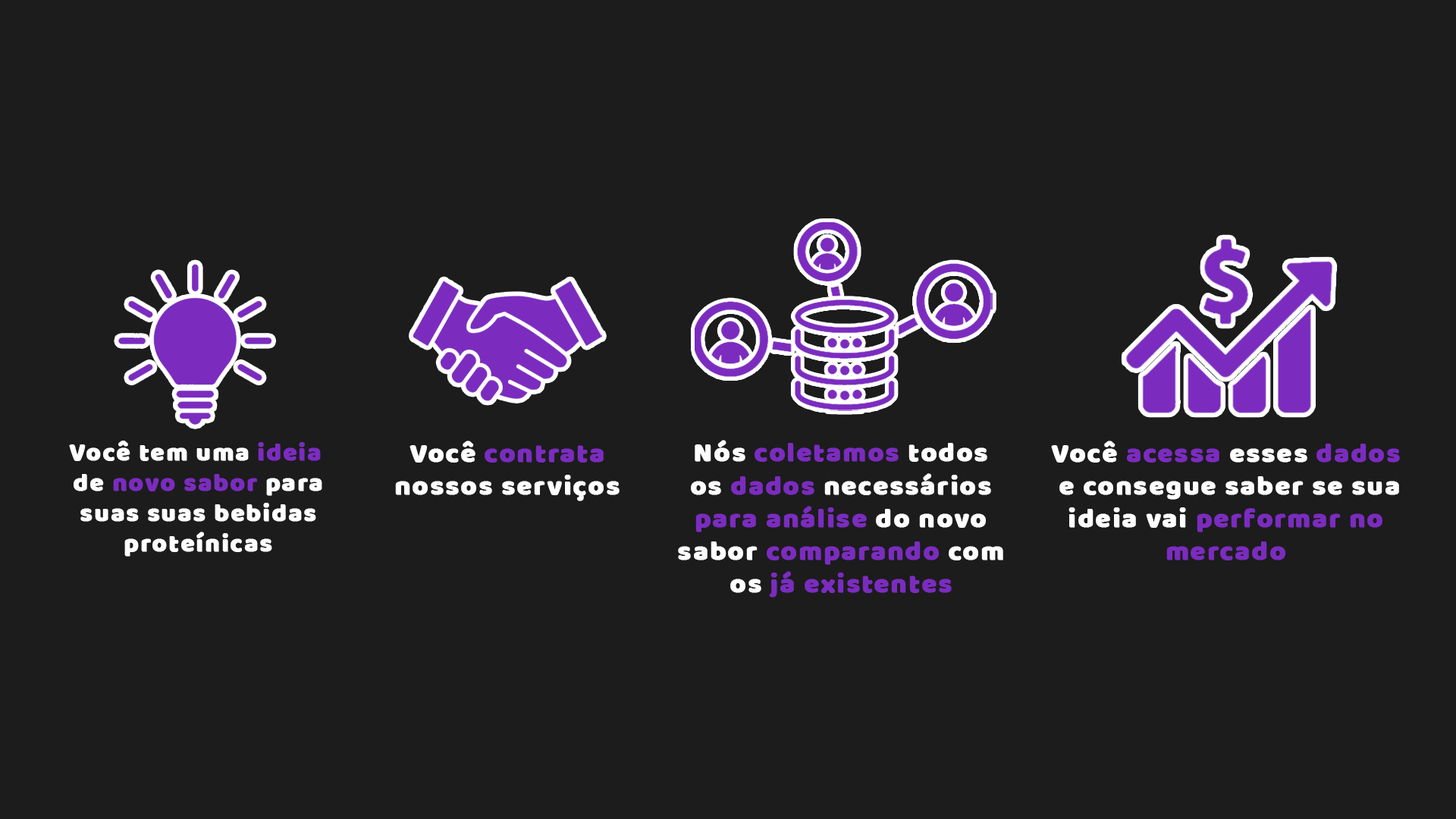
<style>
.page{position:relative;width:1456px;height:819px;background:#1c1c1c}
.page>*{position:absolute;margin:0}
.t1{font:25.3px "Baloo";letter-spacing:0.04em;color:#ffffff;font-weight:bold}
.t2{font:25.3px "Baloo";letter-spacing:0.04em;color:#7b2cbf;font-weight:bold}
.t3{font:27.3px "Baloo";letter-spacing:0.04em;color:#ffffff;font-weight:bold}
.t4{font:27.3px "Baloo";letter-spacing:0.04em;color:#7b2cbf;font-weight:bold}
</style>
<div class="page">
<p class="t1" style="left:69px;top:441px;width:253px;height:116px;text-align:center">Você tem uma <span class="t2">ideia</span> <br>de <span class="t2">novo sabor</span> para<br>suas suas bebidas<br>proteínicas</p>
<p class="t3" style="left:395px;top:441px;width:225px;height:60px;text-align:center">Você <span class="t4">contrata<br></span>nossos serviços</p>
<p class="t3" style="left:678px;top:440px;width:325px;height:158px;text-align:center">Nós <span class="t4">coletamos</span> todos<br>os <span class="t4">dados</span> necessários<br><span class="t4">para análise</span> do novo<br>sabor <span class="t4">comparando</span> com<br>os <span class="t4">já existentes</span></p>
<p class="t3" style="left:1051px;top:441px;width:349px;height:119px;text-align:center">Você <span class="t4">acessa</span> esses <span class="t4">dados<br></span> e consegue saber se sua<br>ideia vai <span class="t4">performar no<br>mercado</span></p>
</div>
